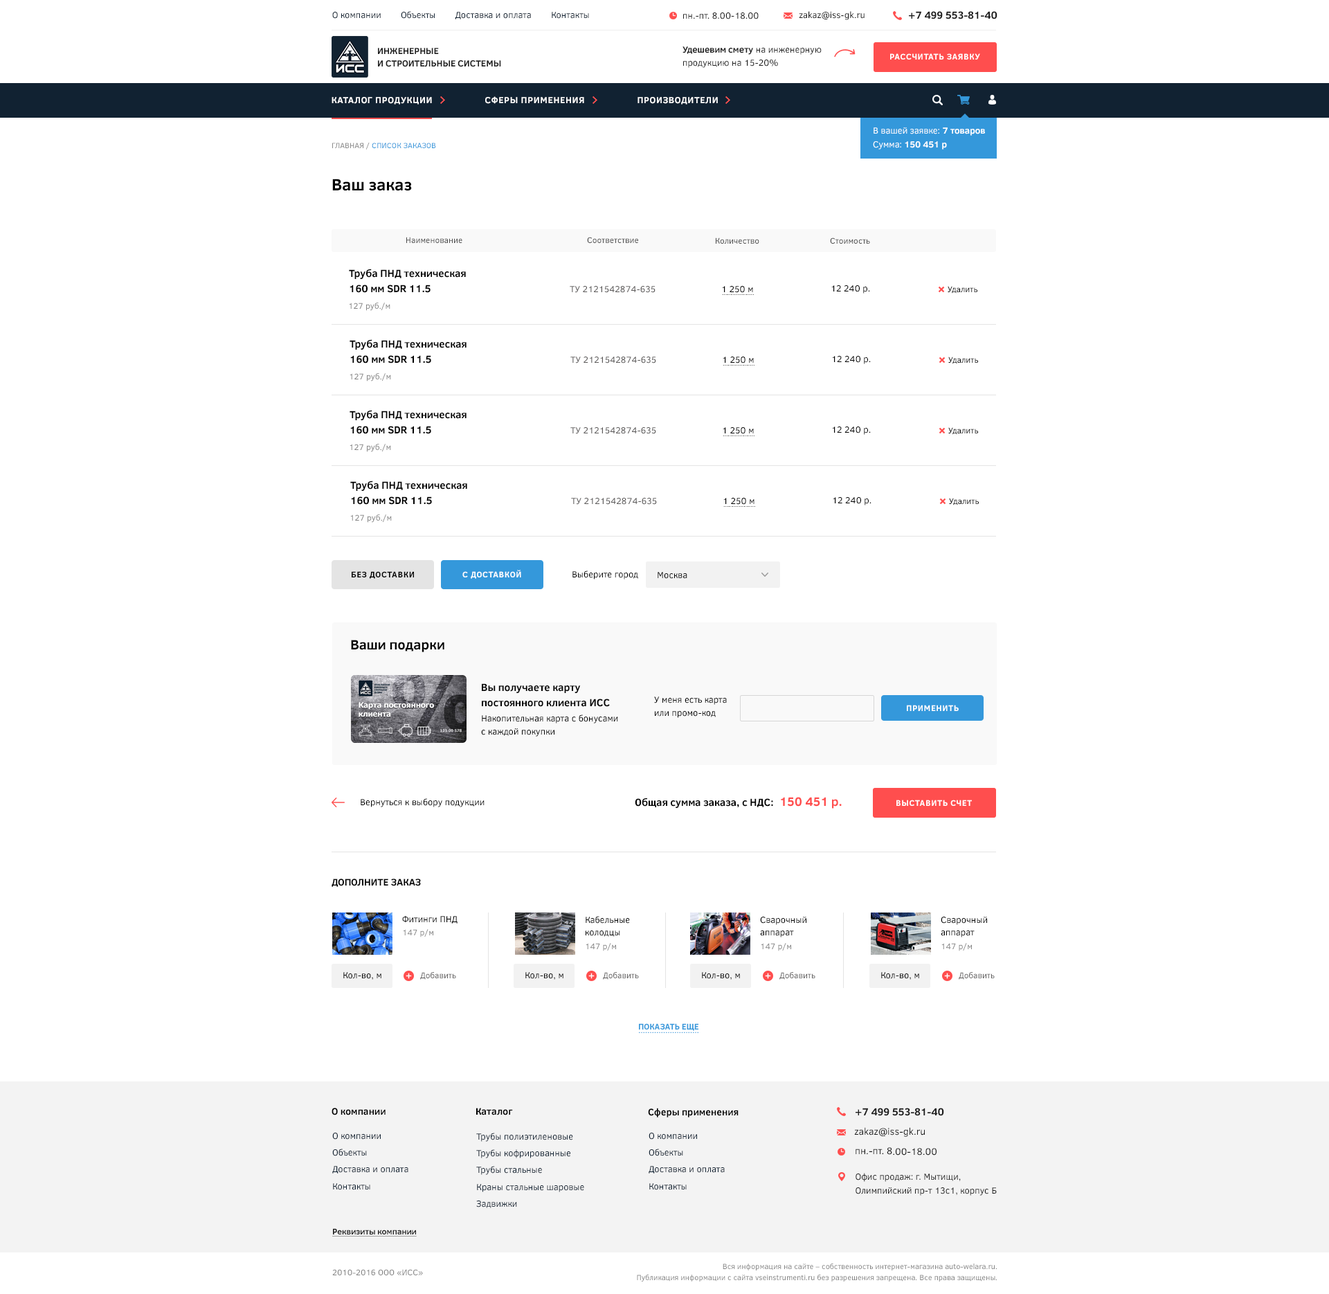
<style>
.page{position:relative;width:1329px;height:1294px;background:#ffffff}
.page>*{position:absolute;margin:0}
.t1{font:9px "ClearSans";color:#112232}
.t2{font:9px "ClearSans";color:#1e1e1e}
.t3{font:10.4px "ClearSans-Bold";color:#1e1e1e;text-transform:uppercase}
.t4{font:9px/9.7px "ClearSans-Bold";color:#1e1e1e}
.t5{font:9px/10.4px "ClearSans";color:#1e1e1e}
.t6{font:9px/10.4px "ClearSans-Bold";color:#1e1e1e}
.t7{font:8.3px "ClearSans-Bold";letter-spacing:0.05em;color:#ffffff;text-transform:uppercase}
.t8{font:9px "ClearSans-Bold";letter-spacing:0.05em;color:#ffffff;text-transform:uppercase}
.t9{font:9px/11.1px "ClearSans";color:#ffffff}
.t10{font:9px/11.1px "ClearSans-Bold";color:#ffffff}
.t11{font:7.6px "ClearSans";color:#3498db;text-transform:uppercase}
.t12{font:7.6px "ClearSans";color:#888888}
.t13{font:16.6px "ClearSans-Bold";color:#000000}
.t14{font:8.3px "ClearSans";color:#494949}
.t15{font:10.4px/12.5px "ClearSans-Bold";color:#000000}
.t16{font:9px "ClearSans";color:#5d5b5b}
.t17{font:9px "ClearSans";color:#000000}
.t18{font:8.3px "ClearSans";color:#000000}
.t19{font:8.3px "ClearSans";color:#858585}
.t20{font:6.2px "ClearSans"}
.t21{font:8.3px "ClearSans-Bold";letter-spacing:0.05em;color:#000000;text-transform:uppercase}
.t22{font:13.8px "ClearSans-Bold";color:#000000}
.t23{font:9px/10.4px "ClearSans";color:#000000}
.t24{font:10.4px "ClearSans-Bold";color:#000000}
.t25{font:12.5px "ClearSans-Bold";color:#ff4e4e}
.t26{font:9.7px "ClearSans-Bold";color:#000000;text-transform:uppercase}
.t27{font:9px/9.7px "ClearSans";color:#000000}
.t28{font:8.3px "ClearSans";color:#5d5b5b}
.t29{font:8.3px "ClearSans-Bold";color:#3498db;text-transform:uppercase}
.t30{font:8.3px "ClearSans";color:#3498db;text-transform:uppercase}
.t31{font:9.7px "ClearSans-Bold";color:#000000}
.t32{font:9px/13.8px "ClearSans";color:#112232}
.t33{font:9.7px "ClearSans";color:#1e1e1e}
.t34{font:9px/13.8px "ClearSans";color:#1e1e1e}
.t35{font:8.3px "ClearSans-Bold";color:#1e1e1e;text-decoration:underline}
.t36{font:7.6px/8.3px "ClearSans";color:#858585}
</style>
<div class="page">
<p class="t1" style="left:332px;top:11px;width:257px;height:8px">О компании        Объекты        Доставка и оплата        Контакты</p>
<p class="t2" style="left:683px;top:12px;width:76px;height:7px">пн.-пт. 8.00-18.00</p>
<p class="t2" style="left:799px;top:11px;width:66px;height:9px">zakaz@iss-gk.ru</p>
<p class="t3" style="left:909px;top:11px;width:89px;height:8px">+7 499 553-81-40</p>
<p class="t4" style="left:378px;top:48px;width:123px;height:19px">ИНЖЕНЕРНЫЕ<br>И СТРОИТЕЛЬНЫЕ СИСТЕМЫ</p>
<p class="t5" style="left:683px;top:46px;width:139px;height:22px"><span class="t6">Удешевим смету</span> на инженерную<br>продукцию на 15-20%</p>
<p class="t7" style="left:890px;top:53px;width:90px;height:7px">рассчитать заявку</p>
<p class="t8" style="left:332px;top:96px;width:386px;height:9px">каталог продукции                    Сферы применения                    производители</p>
<p class="t9" style="left:873px;top:127px;width:112px;height:23px">В вашей заявке: <span class="t10">7 товаров<br></span>Сумма:<span class="t10"> 150 451 р</span></p>
<p class="t11" style="left:332px;top:143px;width:104px;height:7px"><span class="t12">ГЛАВНАЯ / </span>список заказов</p>
<p class="t13" style="left:332px;top:179px;width:80px;height:12px">Ваш заказ</p>
<p class="t14" style="left:406px;top:237px;width:56px;height:6px">Наименование</p>
<p class="t14" style="left:587px;top:237px;width:51px;height:6px">Соответствие</p>
<p class="t14" style="left:716px;top:237px;width:43px;height:7px">Количество</p>
<p class="t14" style="left:830px;top:237px;width:40px;height:7px">Стоимость</p>
<p class="t15" style="left:349px;top:269px;width:117px;height:24px">Труба ПНД техническая<br>160 мм SDR 11.5</p>
<p class="t16" style="left:570px;top:286px;width:86px;height:7px">ТУ 2121542874-635</p>
<p class="t17" style="left:722px;top:286px;width:31px;height:7px">1 250 м</p>
<p class="t17" style="left:831px;top:285px;width:39px;height:9px">12 240 р.</p>
<p class="t18" style="left:948px;top:286px;width:30px;height:8px">Удалить</p>
<p class="t19" style="left:349px;top:303px;width:41px;height:8px">127 руб./м</p>
<p class="t20" style="left:722px;top:294px;width:32px;height:1px">...................</p>
<p class="t15" style="left:350px;top:339px;width:117px;height:24px">Труба ПНД техническая<br>160 мм SDR 11.5</p>
<p class="t16" style="left:570px;top:357px;width:86px;height:6px">ТУ 2121542874-635</p>
<p class="t17" style="left:723px;top:357px;width:31px;height:6px">1 250 м</p>
<p class="t20" style="left:723px;top:365px;width:32px;height:1px">...................</p>
<p class="t17" style="left:832px;top:356px;width:39px;height:8px">12 240 р.</p>
<p class="t18" style="left:948px;top:357px;width:30px;height:7px">Удалить</p>
<p class="t19" style="left:350px;top:373px;width:41px;height:8px">127 руб./м</p>
<p class="t15" style="left:350px;top:410px;width:117px;height:24px">Труба ПНД техническая<br>160 мм SDR 11.5</p>
<p class="t16" style="left:570px;top:427px;width:86px;height:7px">ТУ 2121542874-635</p>
<p class="t17" style="left:723px;top:427px;width:31px;height:7px">1 250 м</p>
<p class="t20" style="left:723px;top:435px;width:32px;height:1px">...................</p>
<p class="t17" style="left:832px;top:426px;width:39px;height:9px">12 240 р.</p>
<p class="t18" style="left:948px;top:427px;width:30px;height:8px">Удалить</p>
<p class="t19" style="left:350px;top:444px;width:41px;height:8px">127 руб./м</p>
<p class="t15" style="left:350px;top:480px;width:117px;height:25px">Труба ПНД техническая<br>160 мм SDR 11.5</p>
<p class="t16" style="left:571px;top:498px;width:86px;height:7px">ТУ 2121542874-635</p>
<p class="t17" style="left:723px;top:498px;width:32px;height:7px">1 250 м</p>
<p class="t17" style="left:833px;top:497px;width:39px;height:8px">12 240 р.</p>
<p class="t18" style="left:949px;top:498px;width:30px;height:7px">Удалить</p>
<p class="t20" style="left:723px;top:506px;width:32px;height:1px">...................</p>
<p class="t19" style="left:350px;top:514px;width:42px;height:9px">127 руб./м</p>
<p class="t7" style="left:462px;top:570px;width:59px;height:9px">с доставкой</p>
<p class="t21" style="left:352px;top:571px;width:62px;height:8px">без доставки</p>
<p class="t17" style="left:573px;top:570px;width:65px;height:9px">Выберите город</p>
<p class="t17" style="left:658px;top:572px;width:29px;height:7px">Москва</p>
<p class="t22" style="left:351px;top:640px;width:93px;height:12px">Ваши подарки</p>
<p class="t15" style="left:482px;top:683px;width:128px;height:24px">Вы получаете карту<br>постоянного клиента ИСС</p>
<p class="t23" style="left:654px;top:696px;width:73px;height:22px">У меня есть карта<br>или промо-код</p>
<p class="t7" style="left:907px;top:705px;width:52px;height:6px">применить</p>
<p class="t23" style="left:481px;top:714px;width:137px;height:23px">Накопительная карта с бонусами<br>с каждой покупки</p>
<p class="t24" style="left:635px;top:798px;width:138px;height:10px">Общая сумма заказа, с НДС:</p>
<p class="t25" style="left:781px;top:797px;width:61px;height:12px">150 451 р.</p>
<p class="t17" style="left:361px;top:798px;width:124px;height:9px">Вернуться к выбору подукции</p>
<p class="t7" style="left:897px;top:800px;width:75px;height:6px">выставить счет</p>
<p class="t26" style="left:332px;top:879px;width:89px;height:8px">ДОПОЛНИТЕ ЗАКАЗ</p>
<p class="t17" style="left:402px;top:915px;width:56px;height:9px">Фитинги ПНД</p>
<p class="t27" style="left:586px;top:916px;width:44px;height:21px">Кабельные<br>колодцы</p>
<p class="t27" style="left:760px;top:917px;width:47px;height:20px">Сварочный<br>аппарат</p>
<p class="t27" style="left:941px;top:917px;width:46px;height:20px">Сварочный<br>аппарат</p>
<p class="t19" style="left:403px;top:929px;width:30px;height:8px">147 р/м</p>
<p class="t19" style="left:586px;top:943px;width:30px;height:8px">147 р/м</p>
<p class="t19" style="left:761px;top:943px;width:30px;height:8px">147 р/м</p>
<p class="t19" style="left:942px;top:943px;width:30px;height:8px">147 р/м</p>
<p class="t17" style="left:343px;top:972px;width:38px;height:8px">Кол-во, м</p>
<p class="t28" style="left:420px;top:972px;width:36px;height:8px">Добавить</p>
<p class="t17" style="left:525px;top:972px;width:39px;height:8px">Кол-во, м</p>
<p class="t28" style="left:603px;top:972px;width:36px;height:8px">Добавить</p>
<p class="t17" style="left:702px;top:972px;width:38px;height:8px">Кол-во, м</p>
<p class="t28" style="left:780px;top:972px;width:36px;height:8px">Добавить</p>
<p class="t17" style="left:881px;top:972px;width:38px;height:8px">Кол-во, м</p>
<p class="t28" style="left:959px;top:972px;width:36px;height:8px">Добавить</p>
<p class="t29" style="left:639px;top:1023px;width:60px;height:8px">ПОКАЗАТЬ ЕЩЕ</p>
<p class="t30" style="left:639px;top:1032px;width:60px;height:1px">...........................</p>
<p class="t31" style="left:332px;top:1108px;width:54px;height:7px">О компании</p>
<p class="t31" style="left:476px;top:1108px;width:37px;height:7px">Каталог</p>
<p class="t31" style="left:648px;top:1108px;width:91px;height:9px">Сферы применения</p>
<p class="t3" style="left:856px;top:1108px;width:88px;height:8px">+7 499 553-81-40</p>
<p class="t32" style="left:332px;top:1133px;width:76px;height:57px">О компании<br>Объекты<br>Доставка и оплата<br>Контакты</p>
<p class="t32" style="left:476px;top:1133px;width:108px;height:75px">Трубы полиэтиленовые<br>Трубы кофрированные<br>Трубы стальные<br>Краны стальные шаровые<br>Задвижки</p>
<p class="t32" style="left:649px;top:1133px;width:76px;height:57px">О компании<br>Объекты<br>Доставка и оплата<br>Контакты</p>
<p class="t33" style="left:854px;top:1127px;width:71px;height:10px">zakaz@iss-gk.ru</p>
<p class="t33" style="left:856px;top:1147px;width:81px;height:8px">пн.-пт. 8.00-18.00</p>
<p class="t34" style="left:856px;top:1173px;width:141px;height:23px">Офис продаж: г. Мытищи, Олимпийский пр-т 13с1, корпус Б</p>
<p class="t35" style="left:332px;top:1228px;width:85px;height:8px">Реквизиты компании</p>
<p class="t36" style="left:637px;top:1263px;width:360px;height:18px;text-align:right">Вся информация на сайте – собственность интернет-магазина auto-welara.ru.<br>Публикация информации с сайта vseinstrumenti.ru без разрешения запрещена. Все права защищены.</p>
<p class="t19" style="left:332px;top:1269px;width:91px;height:6px">2010-2016 ООО «ИСС»</p>
</div>
